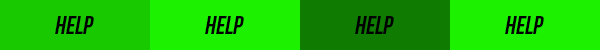
<style>
.page{position:relative;width:600px;height:50px;background:#1cf100}
.page>*{position:absolute;margin:0}
.t1{font:25.4px "BebasNeue";letter-spacing:-0.009em;color:#000000;font-style:italic}
</style>
<div class="page">
<p class="t1" style="left:55px;top:16px;width:39px;height:18px">Help</p>
<p class="t1" style="left:205px;top:16px;width:39px;height:18px">Help</p>
<p class="t1" style="left:355px;top:16px;width:39px;height:18px">Help</p>
<p class="t1" style="left:505px;top:16px;width:39px;height:18px">Help</p>
</div>
